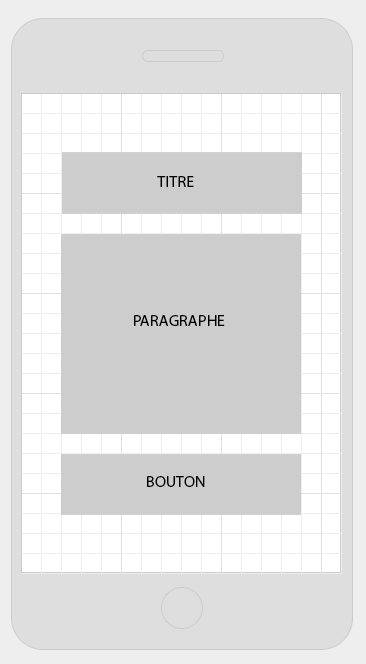
<style>
.page{position:relative;width:366px;height:664px;background:#cdcdcd}
.page>*{position:absolute;margin:0}
.t1{font:16px "MyriadPro-Regular";color:#000000;text-transform:uppercase}
</style>
<div class="page">
<p class="t1" style="left:157px;top:176px;width:37px;height:11px">TITRE</p>
<p class="t1" style="left:134px;top:315px;width:91px;height:11px">Paragraphe</p>
<p class="t1" style="left:147px;top:476px;width:58px;height:11px">bouton</p>
</div>
